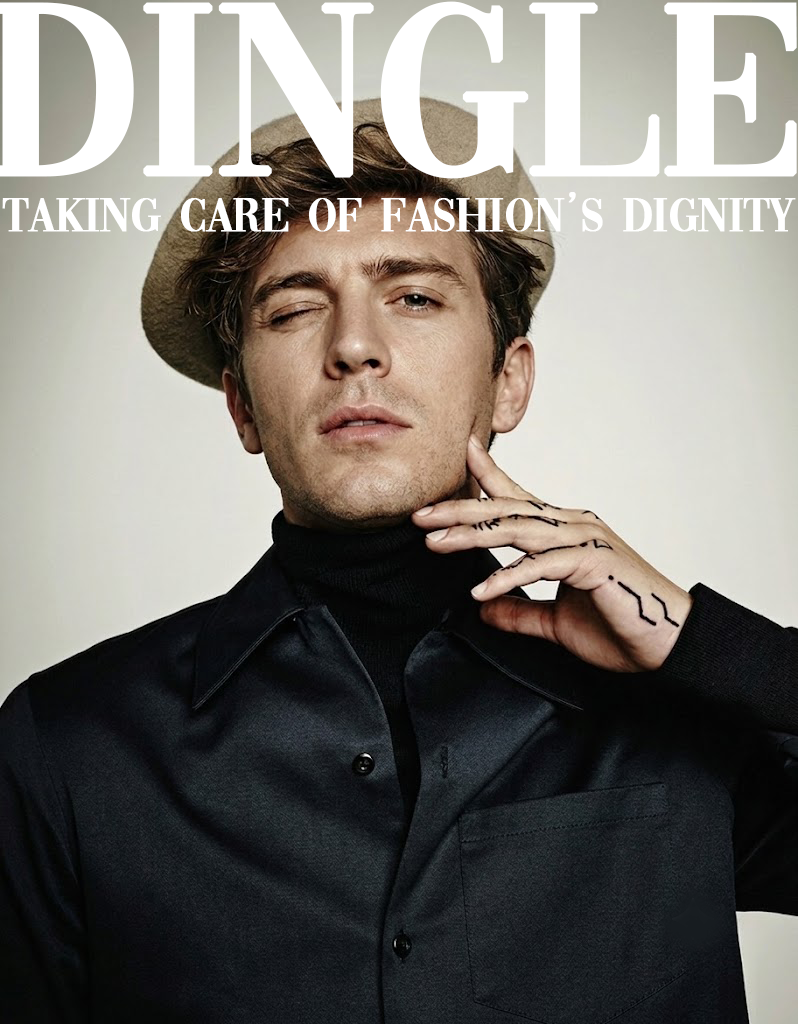
<style>
.page{position:relative;width:798px;height:1024px}
.page>*{position:absolute;margin:0}
.t1{font:49px "Vogue-Regular";letter-spacing:-0.025em;color:#ffffff;font-weight:bold}
.t2{font:49px "Gulim";letter-spacing:-0.025em;color:#ffffff;font-weight:bold}
</style>
<div class="page">
<p class="t1" style="left:2px;top:192px;width:794px;height:40px">Taking care of fashion<span class="t2">’</span>s dignity</p>
</div>
